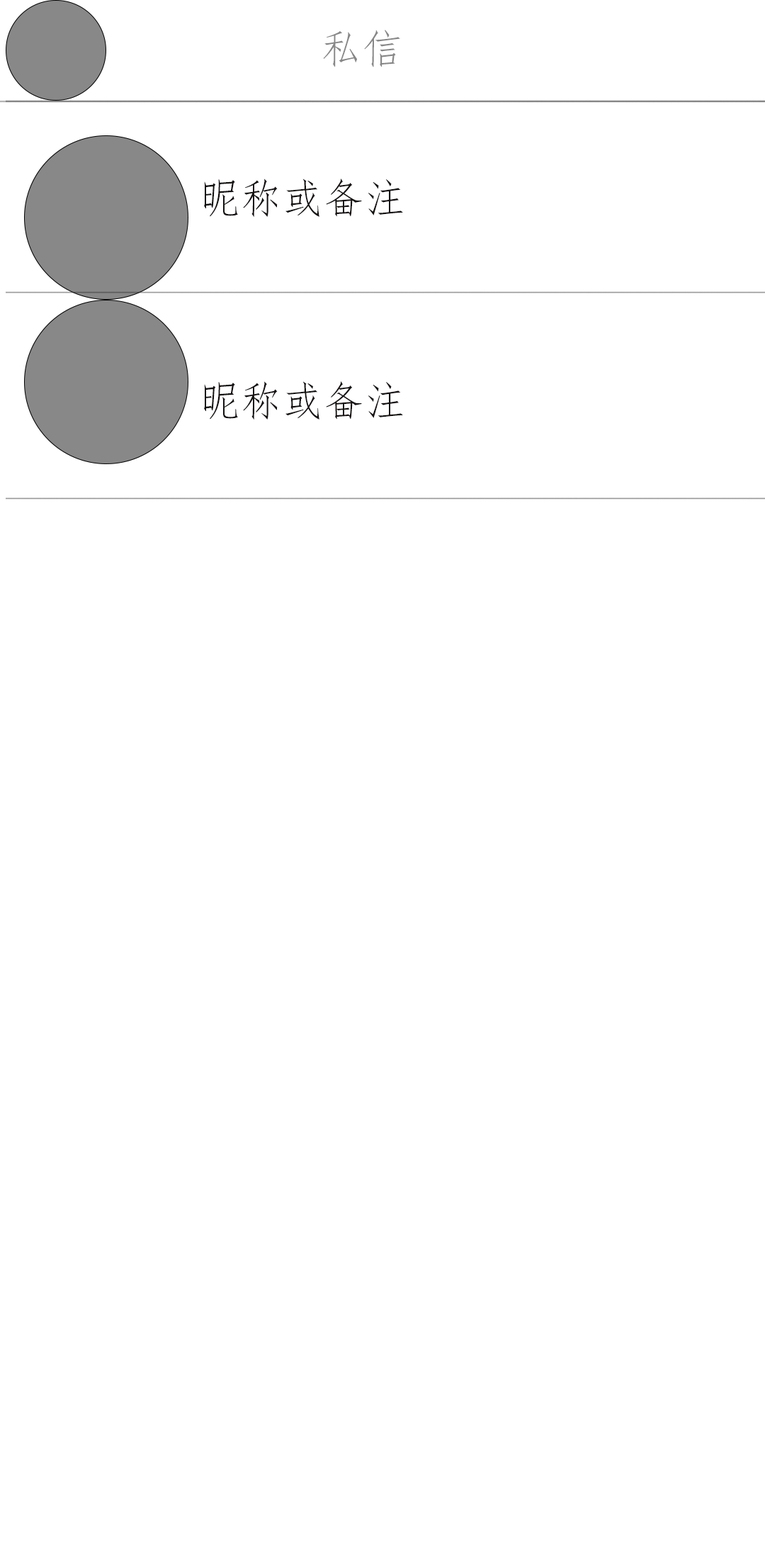
<style>
.page{position:relative;width:765px;height:1559px;background:#ffffff}
.page>*{position:absolute;margin:0}
.t1{font:41.3px "FangSong";color:#878787}
.t2{font:41.3px "FangSong";color:#151010}
</style>
<div class="page">
<p class="t1" style="left:323px;top:30px;width:77px;height:37px">私信</p>
<p class="t2" style="left:204px;top:179px;width:199px;height:38px">昵称或备注</p>
<p class="t2" style="left:204px;top:381px;width:199px;height:38px">昵称或备注</p>
</div>
